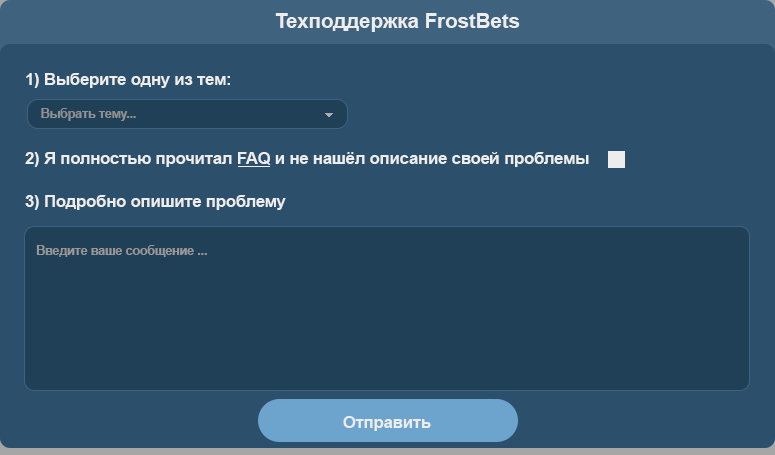
<style>
.page{position:relative;width:775px;height:455px;background:#2c506c}
.page>*{position:absolute;margin:0}
.t1{font:20.8px "Arial-BoldMT";letter-spacing:-0.01em;color:#ededed}
.t2{font:16.7px "Arial-BoldMT";letter-spacing:-0.01em;color:#ededed}
.t3{font:12.5px "Arial-BoldMT";letter-spacing:-0.01em;color:#919191}
.t4{font:12.5px "Arial-BoldMT";letter-spacing:-0.01em;color:#989899}
</style>
<div class="page">
<p class="t1" style="left:275px;top:13px;width:245px;height:19px">Техподдержка FrostBets</p>
<p class="t2" style="left:26px;top:73px;width:204px;height:15px">1) Выберите одну из тем:</p>
<p class="t3" style="left:41px;top:108px;width:95px;height:13px">Выбрать тему...</p>
<p class="t2" style="left:25px;top:152px;width:564px;height:15px">2) Я полностью прочитал FAQ и не нашёл описание своей проблемы</p>
<p class="t2" style="left:25px;top:195px;width:261px;height:15px">3) Подробно опишите проблему</p>
<p class="t4" style="left:36px;top:245px;width:171px;height:12px">Введите ваше сообщение ...</p>
<p class="t2" style="left:343px;top:416px;width:88px;height:15px">Отправить</p>
</div>
